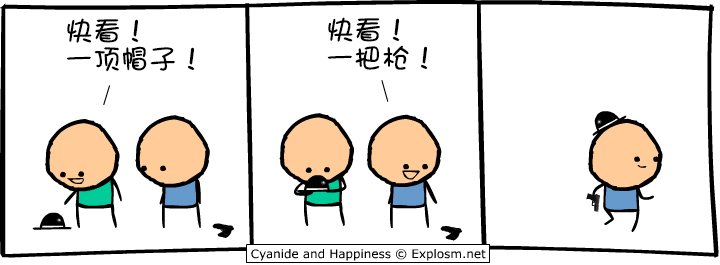
<style>
.page{position:relative;width:720px;height:265px;background:#ffffff}
.page>*{position:absolute;margin:0}
.t1{font:28px/28px "DFShaoNvW5";color:#000000}
</style>
<div class="page">
<p class="t1" style="left:327px;top:17px;width:101px;height:53px">快看！<br>一把枪！</p>
<p class="t1" style="left:66px;top:18px;width:129px;height:54px">快看！<br>一顶帽子！</p>
</div>
